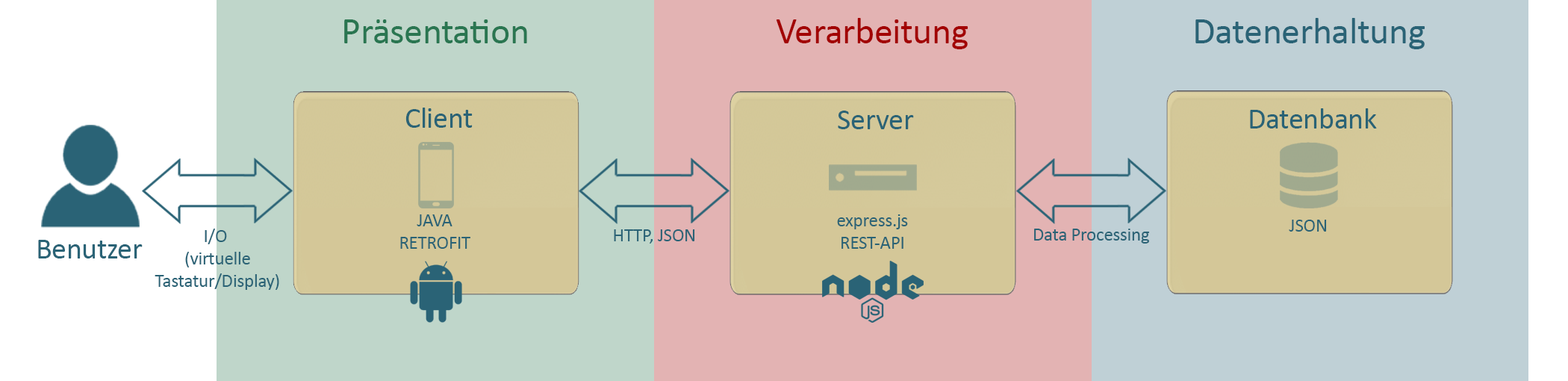
<style>
.page{position:relative;width:1568px;height:381px}
.page>*{position:absolute;margin:0}
.t1{font:37.3px "Calibri";letter-spacing:-0.01em;color:#a20303}
.t2{font:37.3px "Calibri";letter-spacing:-0.01em;color:#2a6376}
.t3{font:37.3px "Calibri";letter-spacing:-0.01em;color:#2a7651}
.t4{font:29.9px "Calibri";letter-spacing:-0.01em;color:#2a6376}
.t5{font:18.7px "Calibri";letter-spacing:-0.01em;color:#2a6376}
</style>
<div class="page">
<p class="t1" style="left:776px;top:18px;width:192px;height:31px">Verarbeitung</p>
<p class="t2" style="left:1195px;top:18px;width:230px;height:31px">Datenerhaltung</p>
<p class="t3" style="left:344px;top:19px;width:183px;height:24px">Präsentation</p>
<p class="t4" style="left:405px;top:108px;width:68px;height:20px">Client</p>
<p class="t4" style="left:838px;top:111px;width:76px;height:18px">Server</p>
<p class="t4" style="left:1250px;top:108px;width:127px;height:20px">Datenbank</p>
<p class="t5" style="left:400px;top:214px;width:70px;height:35px;text-align:center">JAVA<br>RETROFIT</p>
<p class="t5" style="left:837px;top:214px;width:71px;height:35px;text-align:center">express.js<br>REST-API</p>
<p class="t5" style="left:1289px;top:220px;width:38px;height:11px">JSON</p>
<p class="t5" style="left:155px;top:228px;width:124px;height:62px;text-align:center">I/O <br>(virtuelle<br>Tastatur/Display)</p>
<p class="t5" style="left:614px;top:229px;width:81px;height:14px">HTTP, JSON</p>
<p class="t5" style="left:1034px;top:228px;width:115px;height:15px">Data Processing</p>
<p class="t4" style="left:38px;top:240px;width:105px;height:18px">Benutzer</p>
</div>
